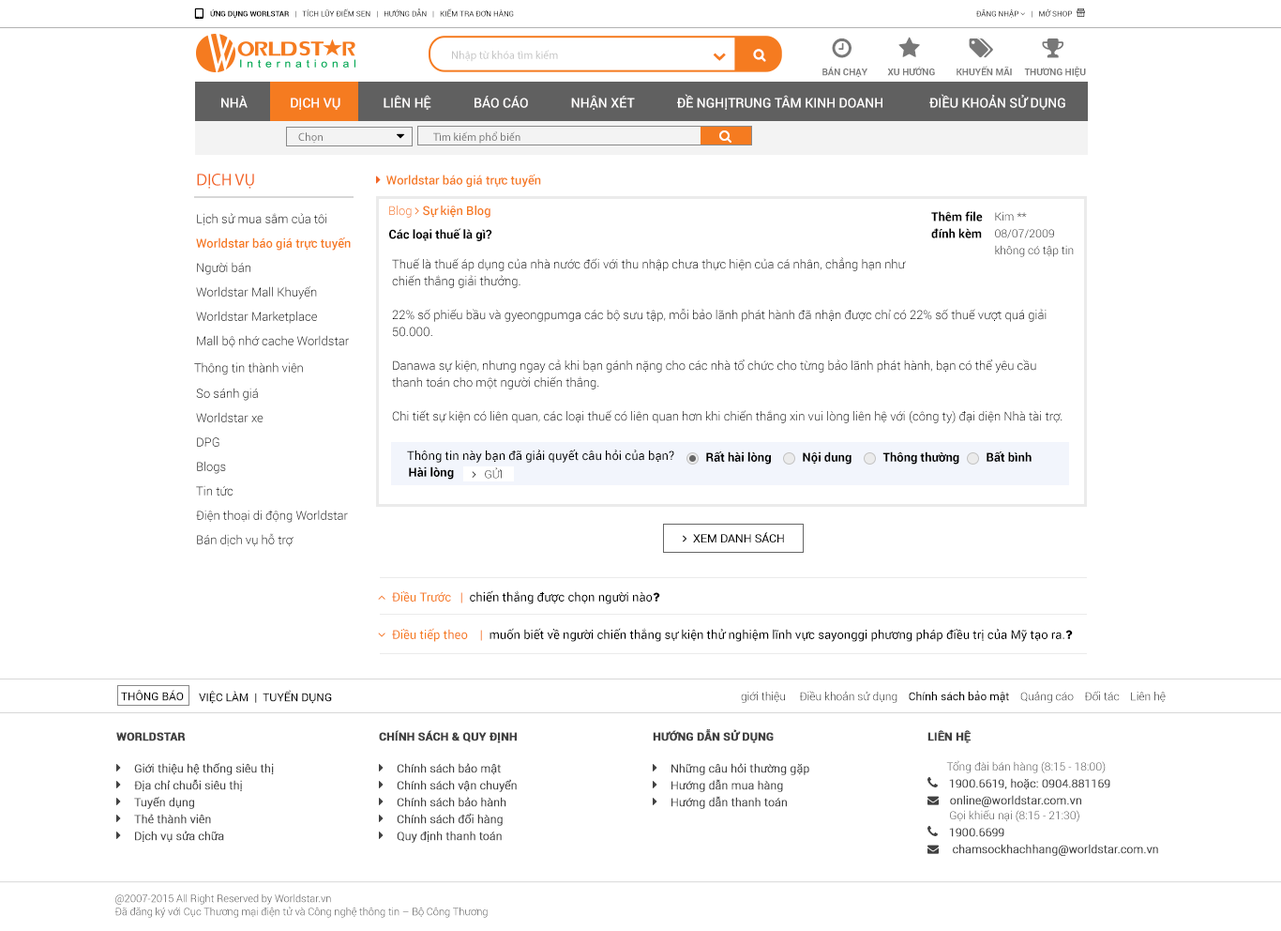
<style>
.page{position:relative;width:1281px;height:931px;background:#ffffff}
.page>*{position:absolute;margin:0}
.t1{font:7.5px "Roboto-Bold";color:#000000;text-transform:uppercase}
.t2{font:7.5px "Roboto-Regular";color:#000000;text-transform:uppercase}
.t3{font:11.3px "MyriadPro-Regular";color:#c3c3c3}
.t4{font:9.4px "Roboto-Bold";color:#787878;text-transform:uppercase}
.t5{font:13.1px "Roboto-Medium";color:#fffefe;text-transform:uppercase}
.t6{font:16.9px "MyriadPro-Regular";color:#f26522;text-transform:uppercase}
.t7{font:12.2px/24.4px "Roboto-Light";color:#000000}
.t8{font:12.2px/24.4px "Roboto-Medium";color:#f57b20}
.t9{font:12.2px/16.9px "Roboto-Bold";color:#000000}
.t10{font:11.3px/16.9px "Roboto-Light"}
.t11{font:12.2px "Roboto-Bold";color:#010101}
.t12{font:12.2px/16.9px "Roboto-Light";color:#000000}
.t13{font:12.2px "Roboto-Light"}
.t14{font:12.2px/24.4px "Roboto-Light"}
.t15{font:12.2px "Roboto-Regular";color:#000000}
.t16{font:12.2px "Roboto-Bold";color:#000000}
.t17{font:11.3px "Roboto-Regular";color:#000000}
.t18{font:11.3px "Roboto-Light";color:#000000}
.t19{font:10.3px/13.1px "Roboto-Light";color:#414141}
</style>
<div class="page">
<p class="t1" style="left:210px;top:8px;width:304px;height:10px">ứng dụng Worlstar   |   <span class="t2">Tích lũy điểm sen</span>   |   <span class="t2">hướng dẫn</span>   |   <span class="t2">kiểm tra đơn hàng</span></p>
<p class="t3" style="left:452px;top:50px;width:106px;height:12px">Nhập từ khóa tìm kiếm</p>
<p class="t4" style="left:957px;top:66px;width:55px;height:10px">khuyến mãi</p>
<p class="t4" style="left:823px;top:67px;width:45px;height:10px">Bán chạy</p>
<p class="t4" style="left:887px;top:67px;width:48px;height:9px">xu hướng</p>
<p class="t4" style="left:1024px;top:67px;width:62px;height:10px">thương hiệu</p>
<p class="t5" style="left:221px;top:94px;width:845px;height:16px">nhà             Dịch vụ             Liên hệ             báo cáo             Nhận xét             đề nghịtrung tâm kinh doanh              Điều khoản sử dụng</p>
<p class="t6" style="left:197px;top:174px;width:57px;height:15px">Dịch vụ</p>
<p class="t7" style="left:196px;top:213px;width:155px;height:134px">Lịch sử mua sắm của tôi<br><span class="t8">Worldstar báo giá trực tuyến<br></span>Người bán<br>Worldstar Mall Khuyến<br>Worldstar Marketplace<br>Mall bộ nhớ cache Worldstar</p>
<p class="t9" style="left:932px;top:211px;width:51px;height:27px">Thêm file <br>đính kèm</p>
<p class="t10" style="left:995px;top:211px;width:79px;height:46px">Kim **<br>08/07/2009<br>không có tập tin</p>
<p class="t11" style="left:389px;top:228px;width:103px;height:13px">Các loại thuế là gì?</p>
<p class="t12" style="left:392px;top:257px;width:671px;height:166px">Thuế là thuế áp dụng của nhà nước đối với thu nhập chưa thực hiện của cá nhân, chẳng hạn như <br>chiến thắng giải thưởng.<br><br>22% số phiếu bầu và gyeongpumga các bộ sưu tập, mỗi bảo lãnh phát hành đã nhận được chỉ có 22% số thuế vượt quá giải  50.000.<br><br>Danawa sự kiện, nhưng ngay cả khi bạn gánh nặng cho các nhà tổ chức cho từng bảo lãnh phát hành, bạn có thể yêu cầu thanh toán cho một người chiến thắng.<br><br>Chi tiết sự kiện có liên quan, các loại thuế có liên quan hơn khi chiến thắng xin vui lòng liên hệ với (công ty) đại diện Nhà tài trợ.</p>
<p class="t13" style="left:194px;top:362px;width:109px;height:13px">Thông tin thành viên</p>
<p class="t14" style="left:196px;top:387px;width:152px;height:159px">So sánh giá<br>Worldstar xe<br>DPG<br>Blogs<br>Tin tức<br>Điện thoại di động Worldstar<br>Bán dịch vụ hỗ trợ</p>
<p class="t15" style="left:407px;top:449px;width:267px;height:13px">Thông tin này bạn đã giải quyết câu hỏi của bạn?</p>
<p class="t16" style="left:706px;top:451px;width:65px;height:13px">Rất hài lòng</p>
<p class="t16" style="left:803px;top:451px;width:49px;height:13px">Nội dung</p>
<p class="t16" style="left:883px;top:451px;width:77px;height:13px">Thông thường</p>
<p class="t16" style="left:987px;top:451px;width:45px;height:11px">Bất bình</p>
<p class="t16" style="left:409px;top:466px;width:45px;height:13px">Hài lòng</p>
<p class="t17" style="left:121px;top:689px;width:63px;height:12px">THÔNG BÁO</p>
<p class="t17" style="left:199px;top:689px;width:133px;height:15px">VIỆC LÀM  |  TUYỂN DỤNG</p>
<p class="t18" style="left:741px;top:690px;width:425px;height:13px">giới thiệu     Điều khoản sử dụng    <span class="t17">Chính sách bảo mật</span>    Quảng cáo    Đối tác    Liên hệ</p>
<p class="t19" style="left:114px;top:893px;width:374px;height:24px">@2007-2015 All Right Reserved by Worldstar.vn <br>Đã đăng ký với Cục Thương mại điện tử và Công nghệ thông tin – Bộ Công Thương</p>
</div>
